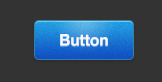
<style>
.page{position:relative;width:162px;height:82px;background:#333333}
.page>*{position:absolute;margin:0}
.t1{font:16px "AlteHaasGrotesk_Bold";letter-spacing:-0.025em;color:#f8f8f8}
</style>
<div class="page">
<p class="t1" style="left:60px;top:34px;width:48px;height:12px">Button</p>
</div>
